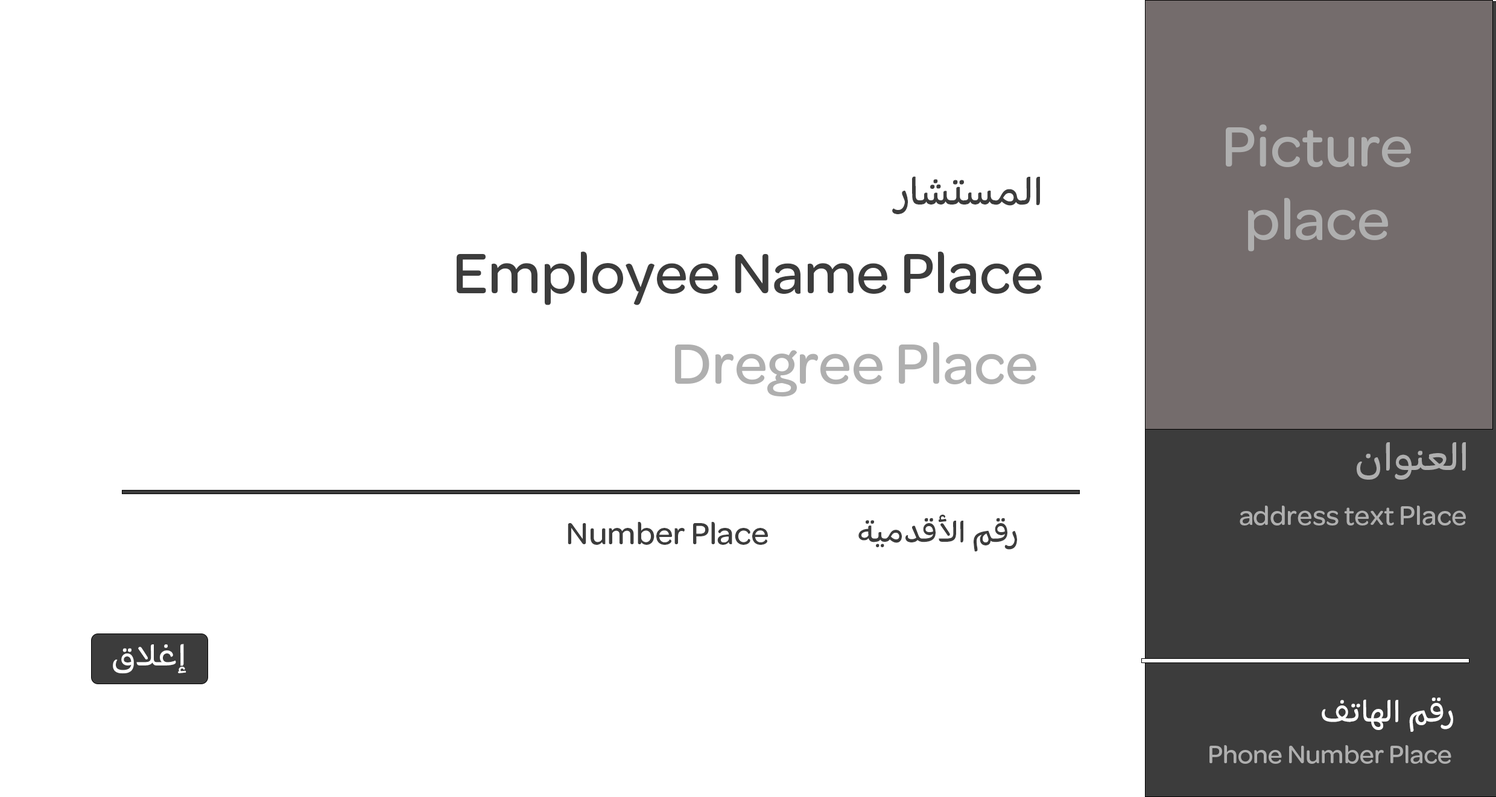
<style>
.page{position:relative;width:1496px;height:797px;background:#ffffff}
.page>*{position:absolute;margin:0}
.t1{font:60.7px "OmnesArabicMedium";color:#afafaf}
.t2{font:42.4px "OmnesArabicMedium";color:#3c3c3c}
.t3{font:60.7px "OmnesArabicMedium";color:#3c3c3c}
.t4{font:42.2px "OmnesArabicMedium";color:#afafaf}
.t5{font:28.5px "OmnesArabicMedium";color:#afafaf}
.t6{font:33px "OmnesArabicMedium";color:#3c3c3c}
.t7{font:33px "OmnesArabicMedium";color:#ffffff}
.t8{font:33.5px "OmnesArabicMedium";color:#ffffff}
.t9{font:26.8px "OmnesArabicMedium";color:#afafaf}
</style>
<div class="page">
<p class="t1" style="left:1226px;top:124px;width:185px;height:128px;text-align:center">Picture<br>place</p>
<p class="t2" style="left:892px;top:176px;width:148px;height:38px">المستشار</p>
<p class="t3" style="left:457px;top:252px;width:585px;height:53px">Employee Name Place</p>
<p class="t1" style="left:675px;top:342px;width:361px;height:55px">Dregree Place</p>
<p class="t4" style="left:1357px;top:442px;width:109px;height:38px">العنوان</p>
<p class="t5" style="left:1240px;top:506px;width:226px;height:19px">address text Place</p>
<p class="t6" style="left:568px;top:522px;width:200px;height:23px">Number Place</p>
<p class="t6" style="left:859px;top:515px;width:158px;height:36px">رقم الأقدمية</p>
<p class="t7" style="left:113px;top:644px;width:73px;height:30px">إغلاق</p>
<p class="t8" style="left:1322px;top:697px;width:131px;height:35px">رقم الهاتف</p>
<p class="t9" style="left:1210px;top:745px;width:242px;height:19px">Phone Number Place</p>
</div>
